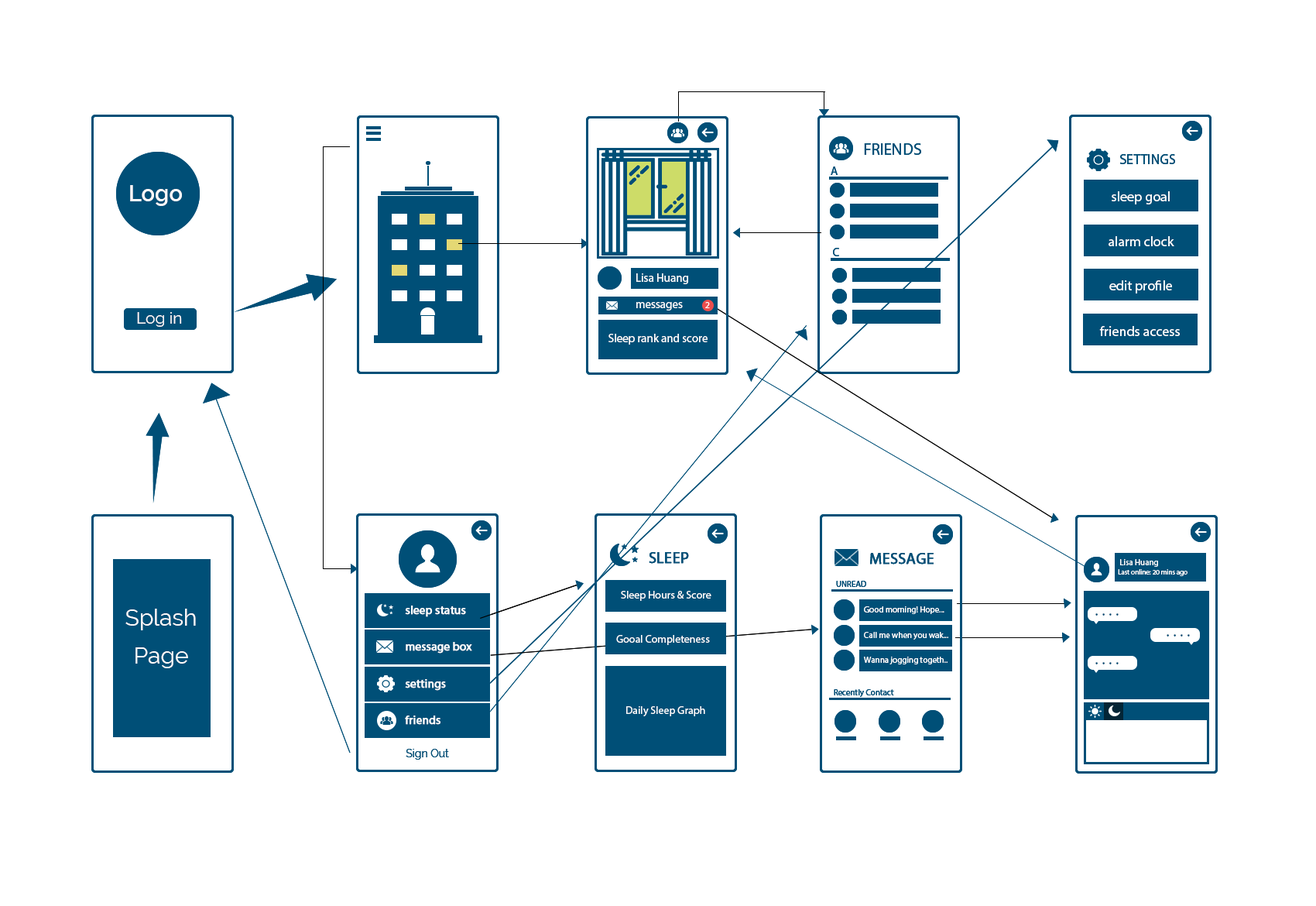
<style>
.page{position:relative;width:1316px;height:906px;background:#ffffff}
.page>*{position:absolute;margin:0}
.t1{font:16.3px "MyriadPro-Regular";color:#004f77}
.t2{font:13.9px "MyriadPro-Regular";color:#004f77}
.t3{font:11.6px "MyriadPro-Regular";color:#004f77}
.t4{font:22.5px "Raleway-SemiBold";color:#fffafa}
.t5{font:13.9px "MyriadPro-Regular";color:#ffffff}
.t6{font:11.6px "MyriadPro-Regular";color:#ffffff}
.t7{font:9.3px "MyriadPro-Regular";color:#ffffff}
.t8{font:16.3px "Raleway";color:#fffafa}
.t9{font:15.5px "MyriadPro-Regular";color:#004f77;font-weight:bold}
.t10{font:7px "MyriadPro-Regular";color:#ffffff}
.t11{font:8.5px "MyriadPro-Regular";color:#ffffff}
.t12{font:8.5px "MyriadPro-Regular";color:#004f77}
.t13{font:10.8px "MyriadPro-Regular";color:#ffffff}
.t14{font:11.6px "MyriadPro-Regular";color:#ffffff;font-weight:bold}
.t15{font:23.2px/37.9px "Raleway";color:#fffafa}
.t16{font:10.8px "Raleway";color:#004f77}
</style>
<div class="page">
<p class="t1" style="left:864px;top:143px;width:57px;height:12px">FRIENDS</p>
<p class="t2" style="left:1120px;top:154px;width:55px;height:10px">SETTINGS</p>
<p class="t3" style="left:831px;top:166px;width:7px;height:9px">A</p>
<p class="t4" style="left:130px;top:185px;width:52px;height:21px">Logo</p>
<p class="t5" style="left:1112px;top:191px;width:58px;height:13px">sleep goal</p>
<p class="t5" style="left:1109px;top:236px;width:66px;height:10px">alarm clock</p>
<p class="t3" style="left:833px;top:248px;width:6px;height:8px">C</p>
<p class="t6" style="left:636px;top:273px;width:52px;height:11px">Lisa Huang</p>
<p class="t5" style="left:1110px;top:280px;width:62px;height:13px">edit profile</p>
<p class="t6" style="left:636px;top:302px;width:47px;height:8px">messages</p>
<p class="t7" style="left:705px;top:302px;width:5px;height:6px">2</p>
<p class="t8" style="left:137px;top:312px;width:45px;height:15px">Log in</p>
<p class="t5" style="left:1099px;top:326px;width:81px;height:10px">friends access</p>
<p class="t6" style="left:609px;top:334px;width:99px;height:11px">Sleep rank and score</p>
<p class="t9" style="left:649px;top:552px;width:40px;height:12px">SLEEP</p>
<p class="t9" style="left:870px;top:553px;width:64px;height:11px">MESSAGE</p>
<p class="t10" style="left:1118px;top:569px;width:70px;height:7px">Last online: 20 mins ago</p>
<p class="t11" style="left:1120px;top:559px;width:38px;height:8px">Lisa Huang</p>
<p class="t12" style="left:836px;top:581px;width:30px;height:6px">UNREAD</p>
<p class="t13" style="left:621px;top:591px;width:91px;height:10px">Sleep Hours &amp; Score</p>
<p class="t14" style="left:405px;top:605px;width:61px;height:12px">sleep status</p>
<p class="t15" style="left:125px;top:609px;width:71px;height:59px;text-align:center">Splash<br>Page</p>
<p class="t11" style="left:864px;top:606px;width:81px;height:8px">Good morning! Hope...</p>
<p class="t1" style="left:1096px;top:613px;width:23px;height:3px">. . . .</p>
<p class="t14" style="left:406px;top:642px;width:66px;height:11px">message box</p>
<p class="t13" style="left:616px;top:635px;width:94px;height:10px">Gooal Completeness</p>
<p class="t11" style="left:864px;top:632px;width:84px;height:8px">Call me when you wak...</p>
<p class="t1" style="left:1167px;top:634px;width:23px;height:2px">. . . .</p>
<p class="t11" style="left:864px;top:657px;width:84px;height:7px">Wanna jogging togeth..</p>
<p class="t1" style="left:1096px;top:662px;width:23px;height:2px">. . . .</p>
<p class="t14" style="left:405px;top:679px;width:41px;height:12px">settings</p>
<p class="t12" style="left:834px;top:689px;width:60px;height:8px">Recently Contact</p>
<p class="t13" style="left:626px;top:706px;width:79px;height:10px">Daily Sleep Graph</p>
<p class="t14" style="left:405px;top:715px;width:36px;height:10px">friends</p>
<p class="t16" style="left:406px;top:749px;width:43px;height:11px">Sign Out</p>
</div>
